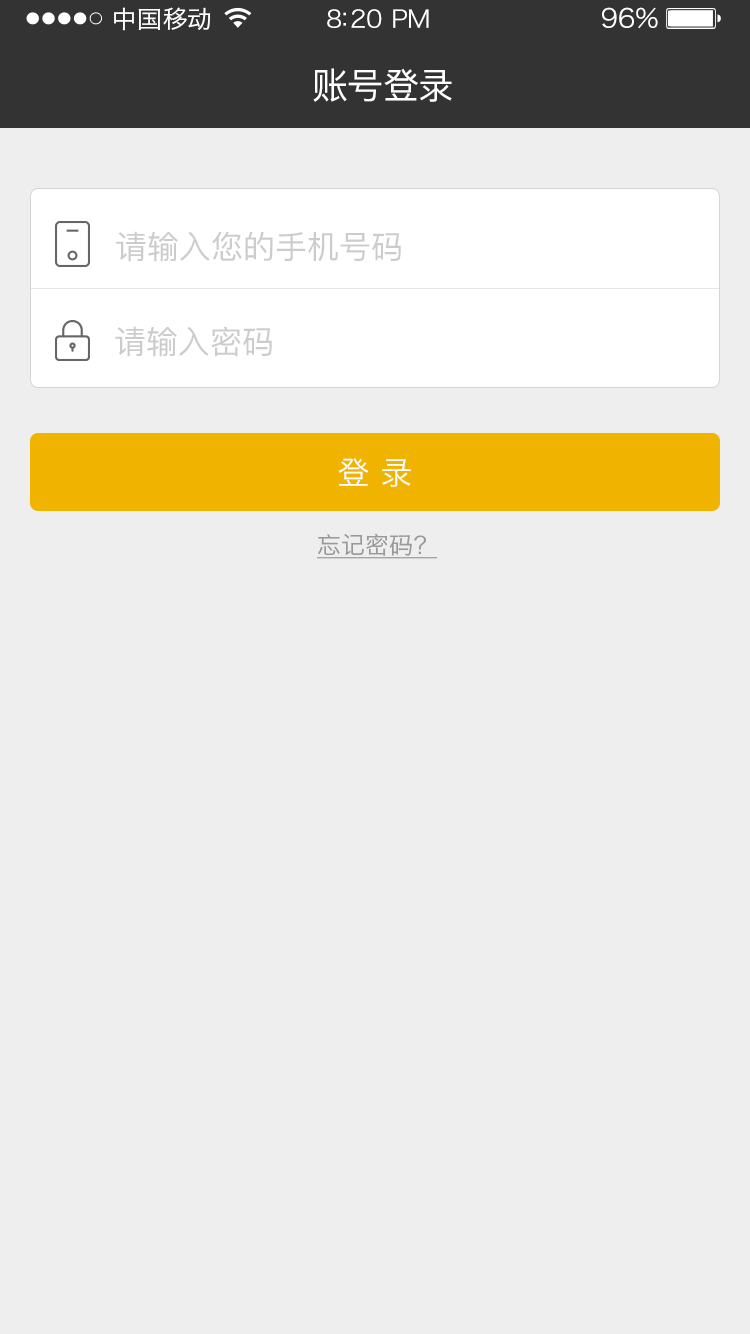
<style>
.page{position:relative;width:750px;height:1334px;background:#eeeeee}
.page>*{position:absolute;margin:0}
.t1{font:24px "HiraginoSansGB-W3";letter-spacing:0.02em;color:#ffffff;scale:1.03 1}
.t2{font:24px "HiraginoSansGB-W3";letter-spacing:-0.02em;color:#ffffff;scale:1.03 1}
.t3{font:26.2px "HiraginoSansGB-W3";letter-spacing:-0.02em;color:#ffffff;scale:1.03 1}
.t4{font:36px "PingFangSC-Regular";letter-spacing:-0.02em;color:#ffffff}
.t5{font:32px "PingFangSC-Regular";color:#cccccc}
.t6{font:32px "HiraginoSansGB-W3";color:#ffffff}
.t7{font:24px "HiraginoSansGB-W3";color:#999999;text-decoration:underline}
</style>
<div class="page">
<p class="t1" style="left:114px;top:7px;width:97px;height:24px">中国移动</p>
<p class="t2" style="left:327px;top:9px;width:102px;height:19px">8:20 PM</p>
<p class="t3" style="left:602px;top:7px;width:56px;height:22px">96%</p>
<p class="t4" style="left:313px;top:68px;width:139px;height:34px">账号登录</p>
<p class="t5" style="left:116px;top:231px;width:285px;height:31px">请输入您的手机号码</p>
<p class="t5" style="left:115px;top:326px;width:157px;height:31px">请输入密码</p>
<p class="t6" style="left:338px;top:458px;width:73px;height:29px">登 录</p>
<p class="t7" style="left:317px;top:533px;width:121px;height:26px">忘记密码？</p>
</div>
